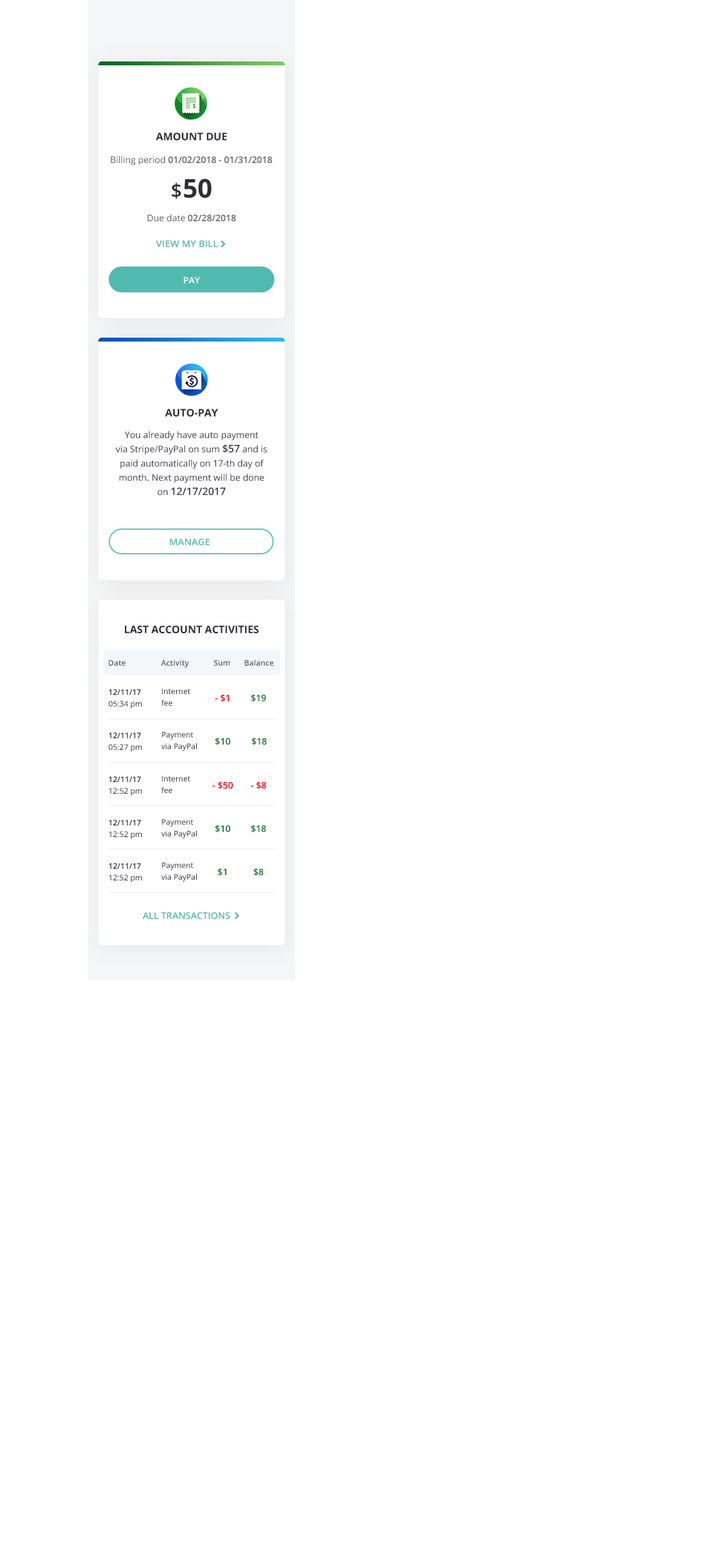
<style>
.page{position:relative;width:704px;height:1568px;background:#ffffff}
.page>*{position:absolute;margin:0}
.t1{font:10.3px "OpenSans-Bold";color:#2f2e33;text-transform:uppercase}
.t2{font:9.1px "OpenSans-SemiBold";color:#625f6a}
.t3{font:9.1px "OpenSans-Regular";color:#625f6a}
.t4{font:25.9px "OpenSans-Bold";color:#2f2e33}
.t5{font:19.4px "OpenSans-SemiBold";letter-spacing:0.05em;color:#2f2e33}
.t6{font:9.1px "OpenSans-SemiBold";color:#ffffff}
.t7{font:9.1px/14.2px "OpenSans-Regular";color:#3e3d42}
.t8{font:10.3px/14.2px "OpenSans-SemiBold";color:#3e3d42}
.t9{font:9.1px "OpenSans-SemiBold";color:#51bab0;text-transform:uppercase;scale:1.05 1}
.t10{font:7.8px "OpenSans-SemiBold";color:#625f6a}
.t11{font:7.8px/11.6px "OpenSans-SemiBold";color:#2f2e33}
.t12{font:7.8px/11.6px "OpenSans-Regular";color:#2f2e33}
.t13{font:9.1px "OpenSans-SemiBold";color:#ef0007}
.t14{font:9.1px "OpenSans-SemiBold";color:#107729}
.t15{font:9.1px "OpenSans-SemiBold";color:#51bab0;text-transform:uppercase}
</style>
<div class="page">
<p class="t1" style="left:156px;top:133px;width:71px;height:7px">Amount due</p>
<p class="t2" style="left:111px;top:156px;width:161px;height:10px"><span class="t3">Billing period </span>01/02/2018 - 01/31/2018</p>
<p class="t4" style="left:171px;top:179px;width:41px;height:20px"><span class="t5">$</span>50</p>
<p class="t2" style="left:147px;top:214px;width:89px;height:8px"><span class="t3">Due date</span> 02/28/2018</p>
<p class="t6" style="left:184px;top:277px;width:16px;height:7px">PAY</p>
<p class="t1" style="left:165px;top:409px;width:53px;height:8px">Auto-pay</p>
<p class="t7" style="left:115px;top:431px;width:152px;height:64px;text-align:center">You already have auto payment <br>via Stripe/PayPal on sum <span class="t8">$57</span> and is paid automatically on 17-th day of month. Next payment will be done <br>on <span class="t8">12/17/2017</span></p>
<p class="t9" style="left:169px;top:538px;width:41px;height:7px">Manage</p>
<p class="t1" style="left:125px;top:626px;width:134px;height:7px">Last Account activities</p>
<p class="t10" style="left:109px;top:660px;width:16px;height:6px">Date</p>
<p class="t10" style="left:161px;top:660px;width:28px;height:8px">Activity</p>
<p class="t10" style="left:213px;top:660px;width:17px;height:6px">Sum</p>
<p class="t10" style="left:245px;top:660px;width:29px;height:6px">Balance</p>
<p class="t11" style="left:109px;top:689px;width:33px;height:20px">12/11/17 <br><span class="t12">05:34 pm</span></p>
<p class="t12" style="left:161px;top:688px;width:29px;height:18px">Internet <br>fee</p>
<p class="t13" style="left:215px;top:694px;width:14px;height:8px">- $1</p>
<p class="t14" style="left:251px;top:694px;width:15px;height:8px">$19</p>
<p class="t11" style="left:109px;top:732px;width:33px;height:20px">12/11/17 <br><span class="t12">05:27 pm</span></p>
<p class="t12" style="left:161px;top:732px;width:36px;height:19px">Payment  <br>via PayPal</p>
<p class="t14" style="left:215px;top:737px;width:15px;height:8px">$10</p>
<p class="t14" style="left:252px;top:737px;width:15px;height:8px">$18</p>
<p class="t11" style="left:109px;top:776px;width:33px;height:20px">12/11/17 <br><span class="t12">12:52 pm</span></p>
<p class="t12" style="left:161px;top:776px;width:29px;height:17px">Internet <br>fee</p>
<p class="t13" style="left:212px;top:781px;width:21px;height:8px">- $50</p>
<p class="t13" style="left:251px;top:781px;width:16px;height:8px">- $8</p>
<p class="t11" style="left:109px;top:820px;width:33px;height:19px">12/11/17 <br><span class="t12">12:52 pm</span></p>
<p class="t12" style="left:161px;top:819px;width:36px;height:19px">Payment  <br>via PayPal</p>
<p class="t14" style="left:215px;top:825px;width:15px;height:8px">$10</p>
<p class="t14" style="left:251px;top:825px;width:15px;height:8px">$18</p>
<p class="t11" style="left:109px;top:863px;width:33px;height:19px">12/11/17 <br><span class="t12">12:52 pm</span></p>
<p class="t12" style="left:161px;top:862px;width:36px;height:20px">Payment  <br>via PayPal</p>
<p class="t14" style="left:217px;top:868px;width:9px;height:8px">$1</p>
<p class="t14" style="left:254px;top:868px;width:9px;height:8px">$8</p>
<p class="t15" style="left:142px;top:912px;width:88px;height:7px">all transactions</p>
</div>
